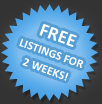
<style>
.page{position:relative;width:102px;height:104px}
.page>*{position:absolute;margin:0}
.t1{font:12px/17px "Calibri-Bold";color:#ffffff}
.t2{font:19px/19px "Calibri-Bold";color:#ffffff}
</style>
<div class="page">
<p class="t1" style="left:19px;top:24px;width:65px;height:57px;text-align:center;rotate:20deg"><span class="t2">FREE<br></span>LISTINGS FOR<br>2 WEEKS!</p>
</div>
